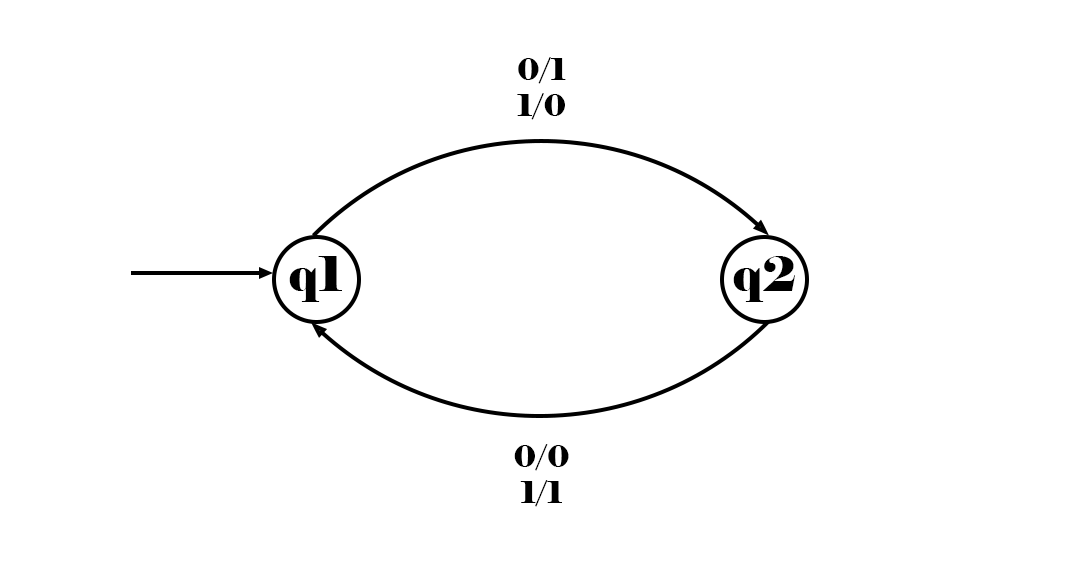
<style>
.page{position:relative;width:1080px;height:562px;background:#ffffff}
.page>*{position:absolute;margin:0}
.t1{font:30px "Elephant-Regular";color:#000000}
.t2{font:48px "Elephant-Regular";color:#000000}
</style>
<div class="page">
<p class="t1" style="left:517px;top:57px;width:49px;height:63px;text-align:center">0/1<br>1/0</p>
<p class="t2" style="left:289px;top:256px;width:53px;height:46px">q1</p>
<p class="t2" style="left:733px;top:256px;width:62px;height:46px">q2</p>
<p class="t1" style="left:514px;top:444px;width:55px;height:63px;text-align:center">0/0<br>1/1</p>
</div>
